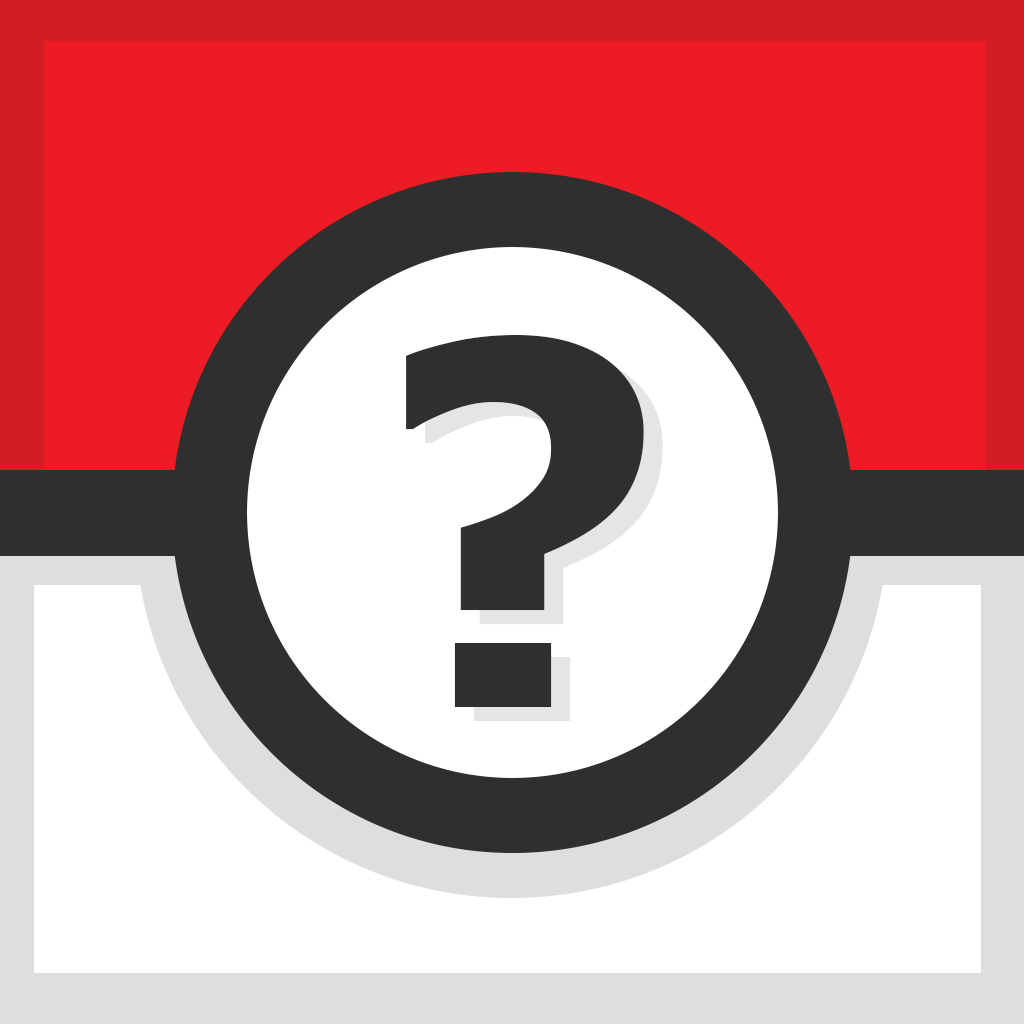
<style>
.page{position:relative;width:1024px;height:1024px;background:#ffffff}
.page>*{position:absolute;margin:0}
.t1{font:500px "Tahoma-Bold";color:#2f2f2f}
</style>
<div class="page">
<p class="t1" style="left:406px;top:335px;width:238px;height:372px">?</p>
</div>
